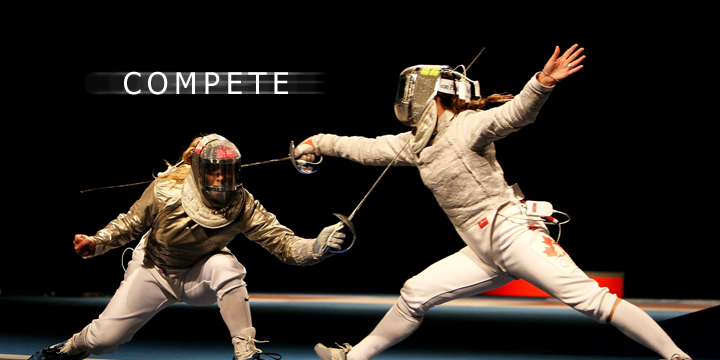
<style>
.page{position:relative;width:720px;height:360px;background:#000000}
.page>*{position:absolute;margin:0}
.t1{font:30px "Tahoma";letter-spacing:0.2em;color:#ffffff}
</style>
<div class="page">
<p class="t1" style="left:124px;top:71px;width:164px;height:24px">COMPETE</p>
</div>
